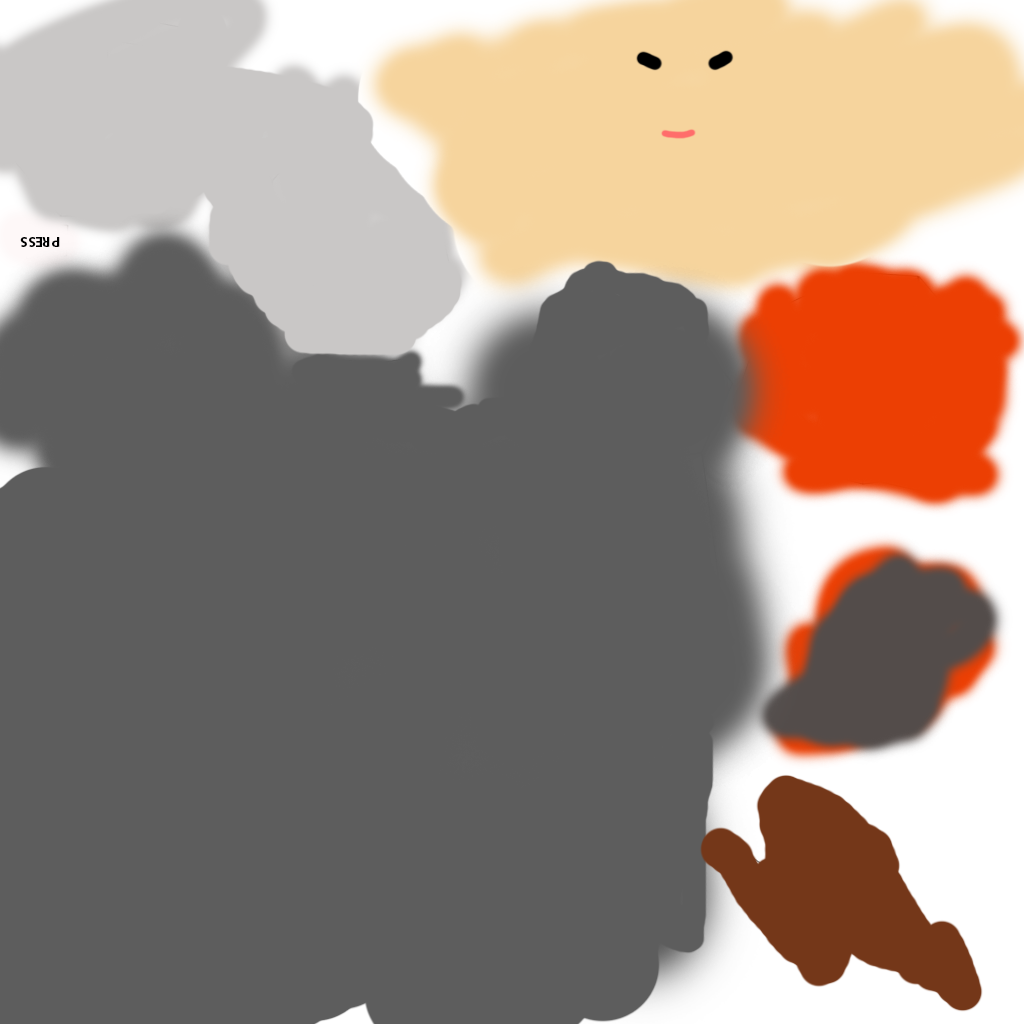
<style>
.page{position:relative;width:1024px;height:1024px;background:#5d5d5d}
.page>*{position:absolute;margin:0}
.t1{font:14px "MyriadPro-Bold";color:#000000}
</style>
<div class="page">
<p class="t1" style="left:20px;top:237px;width:40px;height:10px;rotate:180deg">PRESS</p>
</div>
